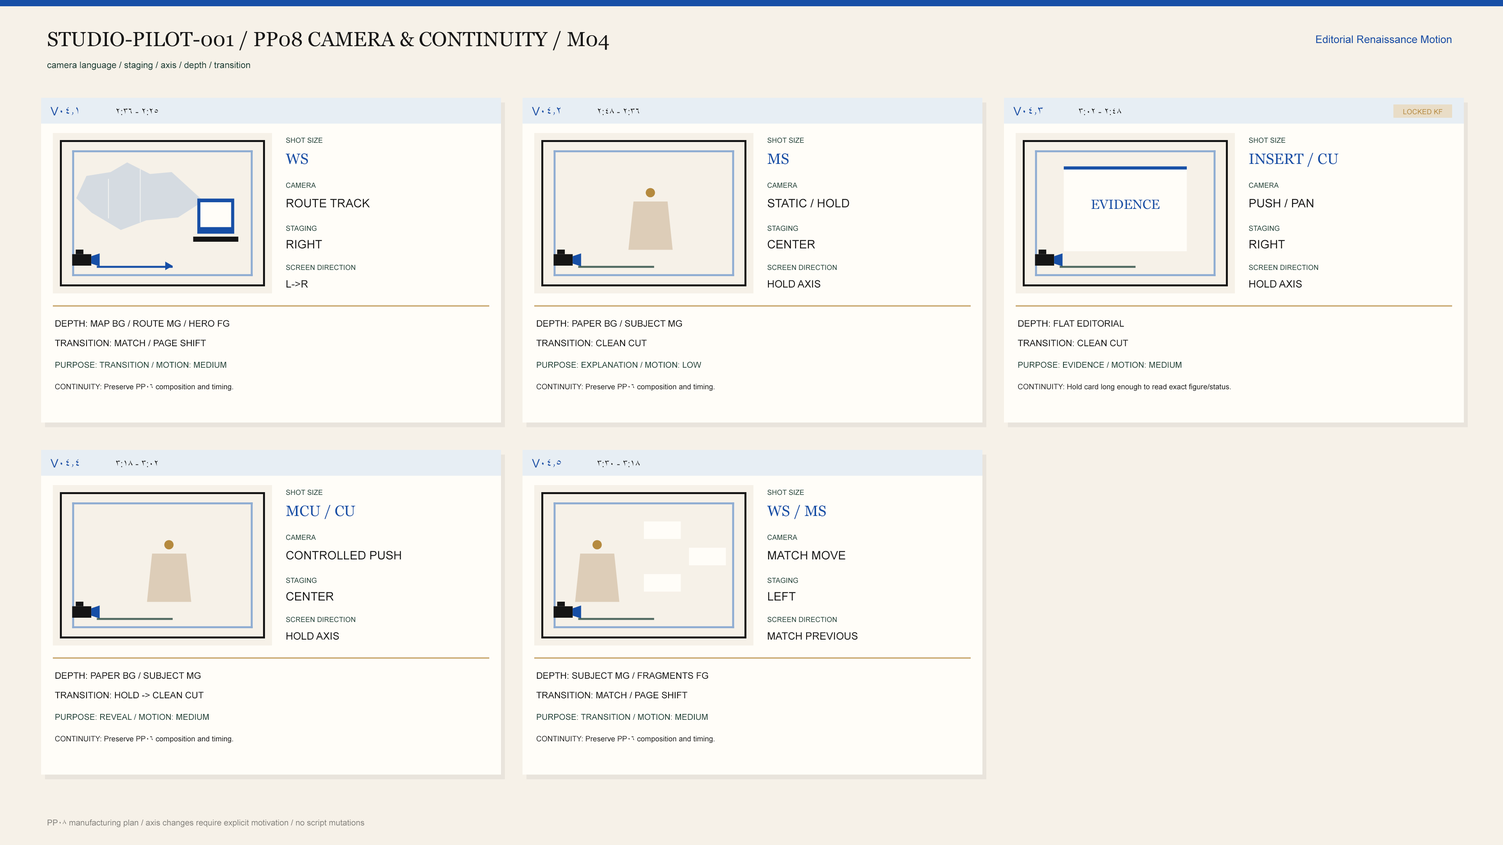
<style>
.page{position:relative;width:1503px;height:845px;background:#f6f1e8}
.page>*{position:absolute;margin:0}
.t1{font:20.3px "Georgia";color:#151515}
.t2{font:10.6px "ArialMT";color:#174fa6}
.t3{font:9px "ArialMT";color:#173c32}
.t4{font:11.7px "ArialMT";color:#174fa6}
.t5{font:9.4px "ArialMT";color:#151515}
.t6{font:7px "ArialMT";color:#b58a3e}
.t7{font:7px "ArialMT";color:#173c32}
.t8{font:14.9px "Georgia";color:#174fa6}
.t9{font:21.5px "ArialMT";color:#b58a3e}
.t10{font:11.7px "ArialMT";color:#151515}
.t11{font:13.3px "Georgia";color:#174fa6}
.t12{font:10.2px "ArialMT";color:#151515}
.t13{font:9px "ArialMT";color:#151515}
.t14{font:8.2px "ArialMT";color:#173c32}
.t15{font:7.4px "ArialMT";color:#151515}
.t16{font:8.2px "ArialMT";color:#817f7a}
</style>
<div class="page">
<p class="t1" style="left:48px;top:31px;width:561px;height:19px">STUDIO-PILOT-001 / PP08 CAMERA &amp; CONTINUITY / M04</p>
<p class="t2" style="left:1316px;top:35px;width:135px;height:8px">Editorial Renaissance Motion</p>
<p class="t3" style="left:47px;top:61px;width:203px;height:9px">camera language / staging / axis / depth / transition</p>
<p class="t4" style="left:50px;top:107px;width:28px;height:8px">V04.1</p>
<p class="t5" style="left:116px;top:108px;width:42px;height:7px">2:25 - 2:36</p>
<p class="t4" style="left:532px;top:107px;width:28px;height:8px">V04.2</p>
<p class="t5" style="left:598px;top:108px;width:41px;height:7px">2:36 - 2:48</p>
<p class="t4" style="left:1013px;top:107px;width:29px;height:8px">V04.3</p>
<p class="t5" style="left:1078px;top:108px;width:43px;height:7px">2:48 - 3:02</p>
<p class="t6" style="left:1403px;top:109px;width:39px;height:6px">LOCKED KF</p>
<p class="t7" style="left:286px;top:137px;width:36px;height:6px">SHOT SIZE</p>
<p class="t7" style="left:767px;top:137px;width:37px;height:6px">SHOT SIZE</p>
<p class="t7" style="left:1249px;top:137px;width:36px;height:6px">SHOT SIZE</p>
<p class="t8" style="left:286px;top:153px;width:22px;height:11px">WS</p>
<p class="t8" style="left:767px;top:153px;width:21px;height:11px">MS</p>
<p class="t8" style="left:1249px;top:153px;width:89px;height:14px">INSERT / CU</p>
<p class="t7" style="left:286px;top:182px;width:30px;height:6px">CAMERA</p>
<p class="t7" style="left:767px;top:182px;width:30px;height:6px">CAMERA</p>
<p class="t7" style="left:1249px;top:182px;width:29px;height:6px">CAMERA</p>
<p class="t9" style="left:645px;top:188px;width:10px;height:10px">●</p>
<p class="t10" style="left:286px;top:199px;width:84px;height:9px">ROUTE TRACK</p>
<p class="t10" style="left:767px;top:199px;width:82px;height:9px">STATIC / HOLD</p>
<p class="t11" style="left:1091px;top:200px;width:68px;height:9px">EVIDENCE</p>
<p class="t10" style="left:1249px;top:199px;width:64px;height:9px">PUSH / PAN</p>
<p class="t7" style="left:286px;top:225px;width:31px;height:6px">STAGING</p>
<p class="t7" style="left:767px;top:225px;width:31px;height:6px">STAGING</p>
<p class="t7" style="left:1249px;top:225px;width:30px;height:6px">STAGING</p>
<p class="t10" style="left:286px;top:240px;width:36px;height:9px">RIGHT</p>
<p class="t10" style="left:767px;top:240px;width:48px;height:9px">CENTER</p>
<p class="t10" style="left:1249px;top:240px;width:36px;height:9px">RIGHT</p>
<p class="t7" style="left:286px;top:265px;width:69px;height:5px">SCREEN DIRECTION</p>
<p class="t7" style="left:767px;top:265px;width:70px;height:5px">SCREEN DIRECTION</p>
<p class="t7" style="left:1249px;top:265px;width:69px;height:5px">SCREEN DIRECTION</p>
<p class="t12" style="left:286px;top:280px;width:22px;height:8px">L-&gt;R</p>
<p class="t12" style="left:768px;top:280px;width:52px;height:8px">HOLD AXIS</p>
<p class="t12" style="left:1249px;top:280px;width:52px;height:8px">HOLD AXIS</p>
<p class="t13" style="left:55px;top:320px;width:174px;height:7px">DEPTH: MAP BG / ROUTE MG / HERO FG</p>
<p class="t13" style="left:536px;top:320px;width:146px;height:7px">DEPTH: PAPER BG / SUBJECT MG</p>
<p class="t13" style="left:1018px;top:320px;width:106px;height:7px">DEPTH: FLAT EDITORIAL</p>
<p class="t13" style="left:55px;top:340px;width:151px;height:7px">TRANSITION: MATCH / PAGE SHIFT</p>
<p class="t13" style="left:536px;top:340px;width:110px;height:7px">TRANSITION: CLEAN CUT</p>
<p class="t13" style="left:1017px;top:340px;width:111px;height:7px">TRANSITION: CLEAN CUT</p>
<p class="t14" style="left:55px;top:362px;width:171px;height:6px">PURPOSE: TRANSITION / MOTION: MEDIUM</p>
<p class="t14" style="left:536px;top:362px;width:165px;height:6px">PURPOSE: EXPLANATION / MOTION: LOW</p>
<p class="t14" style="left:1018px;top:362px;width:163px;height:6px">PURPOSE: EVIDENCE / MOTION: MEDIUM</p>
<p class="t15" style="left:55px;top:384px;width:178px;height:7px">CONTINUITY: Preserve PP06 composition and timing.</p>
<p class="t15" style="left:536px;top:384px;width:179px;height:7px">CONTINUITY: Preserve PP06 composition and timing.</p>
<p class="t15" style="left:1018px;top:384px;width:213px;height:7px">CONTINUITY: Hold card long enough to read exact figure/status.</p>
<p class="t4" style="left:50px;top:459px;width:29px;height:9px">V04.4</p>
<p class="t5" style="left:116px;top:460px;width:42px;height:7px">3:02 - 3:18</p>
<p class="t4" style="left:532px;top:459px;width:29px;height:9px">V04.5</p>
<p class="t5" style="left:597px;top:460px;width:43px;height:7px">3:18 - 3:30</p>
<p class="t7" style="left:286px;top:490px;width:36px;height:5px">SHOT SIZE</p>
<p class="t7" style="left:767px;top:490px;width:37px;height:5px">SHOT SIZE</p>
<p class="t8" style="left:286px;top:505px;width:69px;height:14px">MCU / CU</p>
<p class="t8" style="left:767px;top:505px;width:59px;height:14px">WS / MS</p>
<p class="t9" style="left:164px;top:540px;width:10px;height:10px">●</p>
<p class="t7" style="left:286px;top:535px;width:30px;height:5px">CAMERA</p>
<p class="t9" style="left:592px;top:540px;width:10px;height:10px">●</p>
<p class="t7" style="left:767px;top:535px;width:30px;height:5px">CAMERA</p>
<p class="t10" style="left:286px;top:551px;width:115px;height:9px">CONTROLLED PUSH</p>
<p class="t10" style="left:768px;top:551px;width:77px;height:9px">MATCH MOVE</p>
<p class="t7" style="left:286px;top:578px;width:31px;height:5px">STAGING</p>
<p class="t7" style="left:767px;top:578px;width:31px;height:5px">STAGING</p>
<p class="t10" style="left:286px;top:592px;width:47px;height:9px">CENTER</p>
<p class="t10" style="left:768px;top:592px;width:28px;height:9px">LEFT</p>
<p class="t7" style="left:286px;top:617px;width:69px;height:6px">SCREEN DIRECTION</p>
<p class="t7" style="left:767px;top:617px;width:70px;height:6px">SCREEN DIRECTION</p>
<p class="t12" style="left:286px;top:632px;width:53px;height:8px">HOLD AXIS</p>
<p class="t12" style="left:767px;top:632px;width:90px;height:8px">MATCH PREVIOUS</p>
<p class="t13" style="left:55px;top:672px;width:146px;height:7px">DEPTH: PAPER BG / SUBJECT MG</p>
<p class="t13" style="left:536px;top:672px;width:172px;height:7px">DEPTH: SUBJECT MG / FRAGMENTS FG</p>
<p class="t13" style="left:55px;top:692px;width:148px;height:7px">TRANSITION: HOLD -&gt; CLEAN CUT</p>
<p class="t13" style="left:536px;top:692px;width:151px;height:7px">TRANSITION: MATCH / PAGE SHIFT</p>
<p class="t14" style="left:55px;top:714px;width:154px;height:6px">PURPOSE: REVEAL / MOTION: MEDIUM</p>
<p class="t14" style="left:536px;top:714px;width:171px;height:6px">PURPOSE: TRANSITION / MOTION: MEDIUM</p>
<p class="t15" style="left:55px;top:736px;width:178px;height:7px">CONTINUITY: Preserve PP06 composition and timing.</p>
<p class="t15" style="left:536px;top:736px;width:179px;height:7px">CONTINUITY: Preserve PP06 composition and timing.</p>
<p class="t16" style="left:47px;top:819px;width:317px;height:9px">PP08 manufacturing plan / axis changes require explicit motivation / no script mutations</p>
</div>
